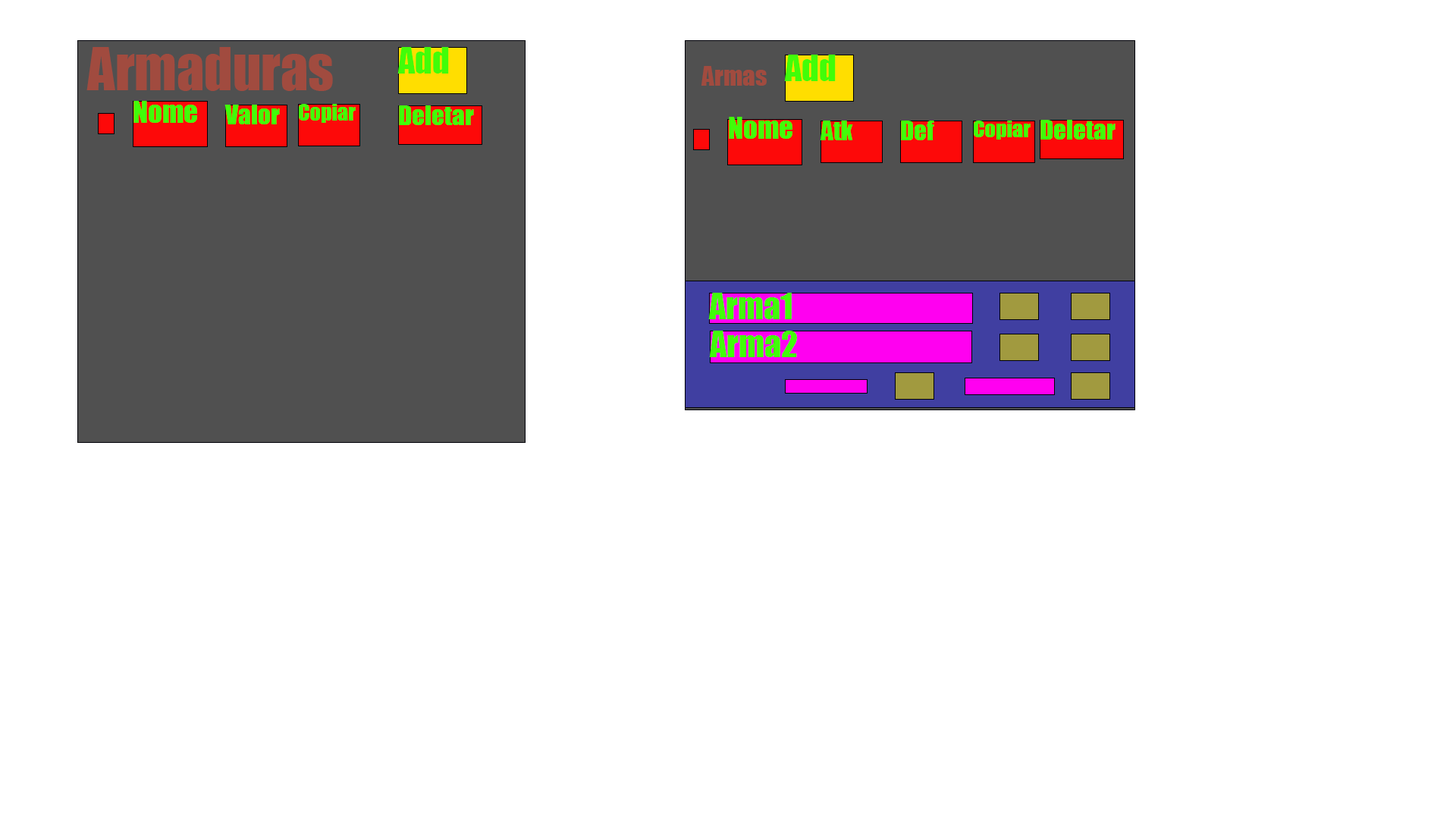
<style>
.page{position:relative;width:1456px;height:819px;background:#ffffff}
.page>*{position:absolute;margin:0}
.t1{font:54.6px "Impact";color:#a14b3f}
.t2{font:33.4px "Impact";color:#41fd09}
.t3{font:25px "Impact";color:#a14b3f}
.t4{font:28.1px "Impact";color:#41fd09}
.t5{font:25px "Impact";color:#41fd09}
.t6{font:21.2px "Impact";color:#41fd09}
</style>
<div class="page">
<p class="t1" style="left:86px;top:47px;width:247px;height:44px">Armaduras</p>
<p class="t2" style="left:397px;top:47px;width:52px;height:27px">Add</p>
<p class="t3" style="left:701px;top:66px;width:66px;height:20px">Armas</p>
<p class="t2" style="left:784px;top:55px;width:52px;height:26px">Add</p>
<p class="t4" style="left:133px;top:101px;width:64px;height:22px">Nome</p>
<p class="t5" style="left:224px;top:105px;width:56px;height:19px">Valor</p>
<p class="t6" style="left:299px;top:104px;width:57px;height:19px">Copiar</p>
<p class="t5" style="left:399px;top:105px;width:75px;height:20px">Deletar</p>
<p class="t4" style="left:729px;top:117px;width:63px;height:22px">Nome</p>
<p class="t5" style="left:820px;top:121px;width:33px;height:19px">Atk</p>
<p class="t5" style="left:901px;top:121px;width:33px;height:19px">Def</p>
<p class="t6" style="left:974px;top:121px;width:57px;height:19px">Copiar</p>
<p class="t5" style="left:1040px;top:120px;width:75px;height:20px">Deletar</p>
<p class="t2" style="left:708px;top:293px;width:84px;height:26px">Arma1</p>
<p class="t2" style="left:709px;top:331px;width:88px;height:26px">Arma2</p>
</div>
